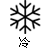
<style>
.page{position:relative;width:50px;height:48px;background:#ffffff}
.page>*{position:absolute;margin:0}
.t1{font:12px "OPPOSans-R";color:#000000}
</style>
<div class="page">
<p class="t1" style="left:19px;top:37px;width:11px;height:11px">冷</p>
</div>
